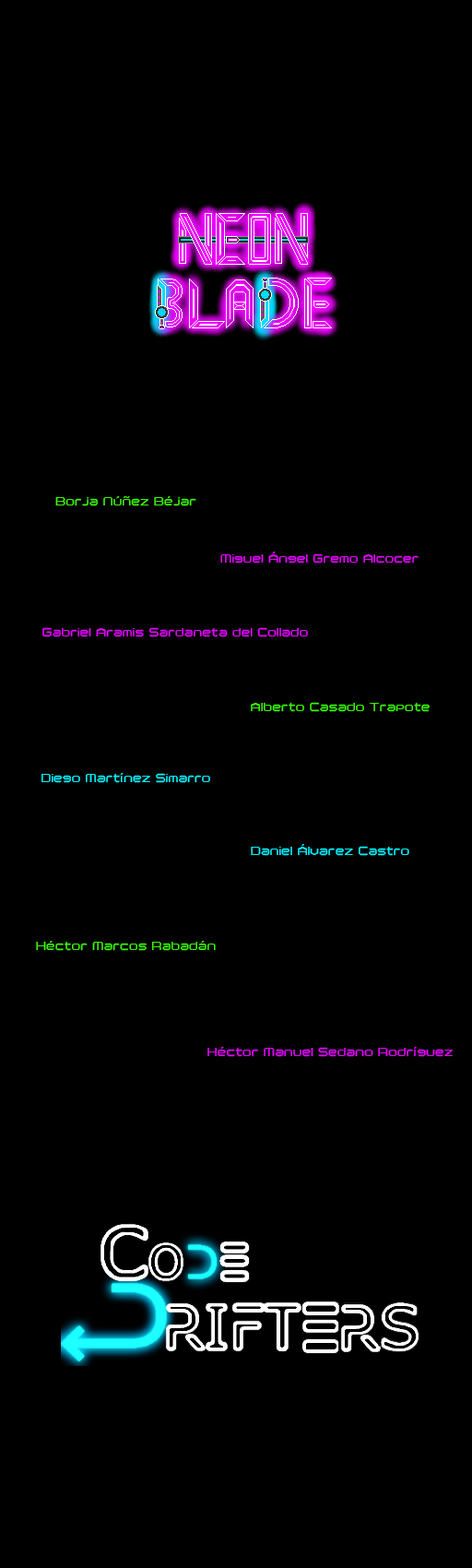
<style>
.page{position:relative;width:472px;height:1568px;background:#000000}
.page>*{position:absolute;margin:0}
.t1{font:12.3px "PolenticalNeonRegular";color:#3cf304}
.t2{font:12.3px "PolenticalNeonRegular";color:#e500ff}
.t3{font:12.3px "PolenticalNeonRegular";color:#00f0fb}
</style>
<div class="page">
<p class="t1" style="left:55px;top:496px;width:141px;height:10px">Borja Núñez Béjar</p>
<p class="t2" style="left:220px;top:552px;width:199px;height:12px">Miguel Ángel Gremo Alcocer</p>
<p class="t2" style="left:42px;top:627px;width:266px;height:10px">Gabriel Aramis Sardaneta del Collado</p>
<p class="t1" style="left:251px;top:702px;width:179px;height:10px">Alberto Casado Trapote</p>
<p class="t3" style="left:42px;top:773px;width:168px;height:10px">Diego Martínez Simarro</p>
<p class="t3" style="left:251px;top:844px;width:159px;height:12px">Daniel Álvarez Castro</p>
<p class="t1" style="left:36px;top:941px;width:180px;height:10px">Héctor Marcos Rabadán</p>
<p class="t2" style="left:208px;top:1047px;width:245px;height:10px">Héctor Manuel Sedano Rodríguez</p>
</div>
